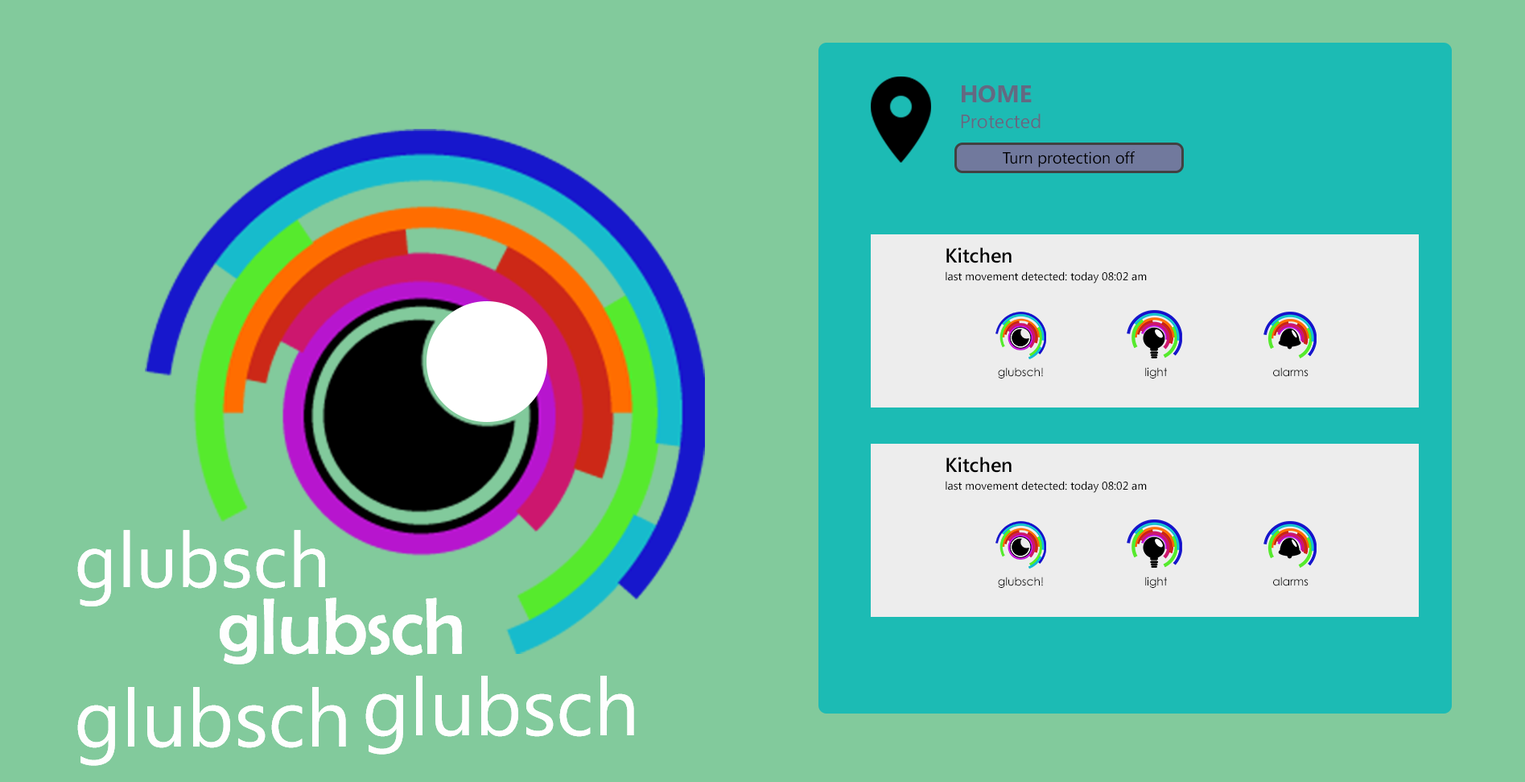
<style>
.page{position:relative;width:1525px;height:782px;background:#82ca9c}
.page>*{position:absolute;margin:0}
.t1{font:24.2px "SegoeUI-Bold";color:#636982}
.t2{font:19.3px "SegoeUI";color:#636982}
.t3{font:16.1px "SegoeUI";color:#000000}
.t4{font:11.3px/8.9px "SegoeUI";color:#000000}
.t5{font:20.1px/8.9px "SegoeUI-SemiBold";color:#000000}
.t6{font:11.3px "CenturyGothic";color:#000000}
.t7{font:80.5px "Corbel";color:#fefefe}
.t8{font:80.5px "BerlinSansFB-Reg";color:#fefefe}
.t9{font:80.5px "Gadugi";color:#fefefe}
.t10{font:80.5px "Ebrima";color:#fefefe}
</style>
<div class="page">
<p class="t1" style="left:962px;top:85px;width:70px;height:18px">HOME</p>
<p class="t2" style="left:961px;top:114px;width:80px;height:15px">Protected</p>
<p class="t3" style="left:1003px;top:151px;width:132px;height:16px">Turn protection off</p>
<p class="t4" style="left:946px;top:247px;width:201px;height:36px"><span class="t5">Kitchen<br><br></span>last movement detected: today 08:02 am</p>
<p class="t6" style="left:998px;top:367px;width:45px;height:11px">glubsch!</p>
<p class="t6" style="left:1146px;top:367px;width:21px;height:11px">light</p>
<p class="t6" style="left:1274px;top:367px;width:35px;height:10px">alarms</p>
<p class="t4" style="left:946px;top:456px;width:201px;height:37px"><span class="t5">Kitchen<br><br></span>last movement detected: today 08:02 am</p>
<p class="t7" style="left:77px;top:530px;width:248px;height:76px">glubsch</p>
<p class="t7" style="left:77px;top:530px;width:248px;height:76px">glubsch</p>
<p class="t6" style="left:998px;top:576px;width:45px;height:12px">glubsch!</p>
<p class="t6" style="left:1146px;top:576px;width:21px;height:12px">light</p>
<p class="t6" style="left:1274px;top:576px;width:35px;height:10px">alarms</p>
<p class="t8" style="left:220px;top:597px;width:242px;height:67px">glubsch</p>
<p class="t8" style="left:220px;top:597px;width:242px;height:67px">glubsch</p>
<p class="t9" style="left:365px;top:675px;width:269px;height:79px">glubsch</p>
<p class="t9" style="left:365px;top:675px;width:269px;height:79px">glubsch</p>
<p class="t10" style="left:77px;top:687px;width:269px;height:79px">glubsch</p>
<p class="t10" style="left:77px;top:687px;width:269px;height:79px">glubsch</p>
</div>
